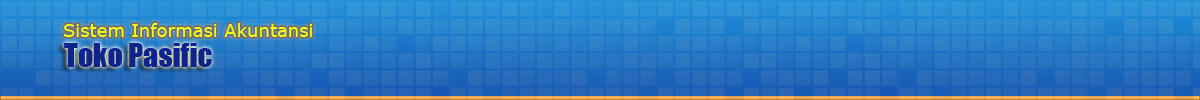
<style>
.page{position:relative;width:1200px;height:100px}
.page>*{position:absolute;margin:0}
.t1{font:18px "Verdana";color:#f2ff1a}
.t2{font:30px "Impact";color:#0f238c}
</style>
<div class="page">
<p class="t1" style="left:64px;top:23px;width:248px;height:14px">Sistem Informasi Akuntansi</p>
<p class="t2" style="left:64px;top:43px;width:148px;height:24px">Toko Pasific</p>
</div>
